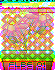
<style>
.page{position:relative;width:55px;height:70px}
.page>*{position:absolute;margin:0}
.t1{font:8px "04b21"}
</style>
<div class="page">
<p class="t1" style="left:9px;top:60px;width:36px;height:5px">FLBE 01</p>
</div>
